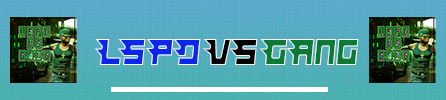
<style>
.page{position:relative;width:446px;height:100px}
.page>*{position:absolute;margin:0}
.t1{font:37.5px "Hindsight2020";color:#0b25eb;scale:0.92 1}
.t2{font:37.5px "Hindsight2020";color:#000000;scale:0.92 1}
.t3{font:37.5px "Hindsight2020";color:#0a7a34;scale:0.92 1}
</style>
<div class="page">
<p class="t1" style="left:94px;top:39px;width:107px;height:26px">LSPD</p>
<p class="t2" style="left:202px;top:39px;width:56px;height:26px">VS</p>
<p class="t3" style="left:259px;top:39px;width:100px;height:26px">GAng</p>
</div>
